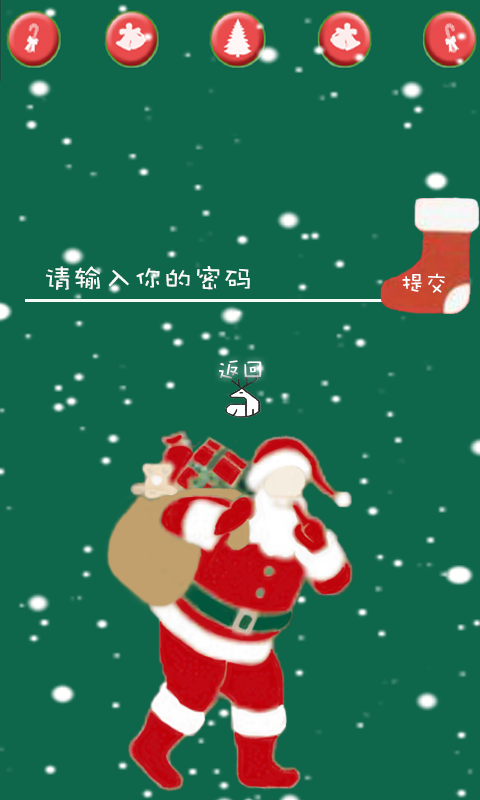
<style>
.page{position:relative;width:480px;height:800px;background:#0f674b}
.page>*{position:absolute;margin:0}
.t1{font:30px "DFWaWaSC-W5";color:#f7f9f7}
.t2{font:24px "DFWaWaSC-W5";color:#fdfeff}
</style>
<div class="page">
<p class="t1" style="left:45px;top:266px;width:205px;height:24px">请输入你的密码</p>
<p class="t2" style="left:402px;top:273px;width:43px;height:20px">提交</p>
<p class="t2" style="left:219px;top:360px;width:43px;height:19px">返回</p>
</div>
